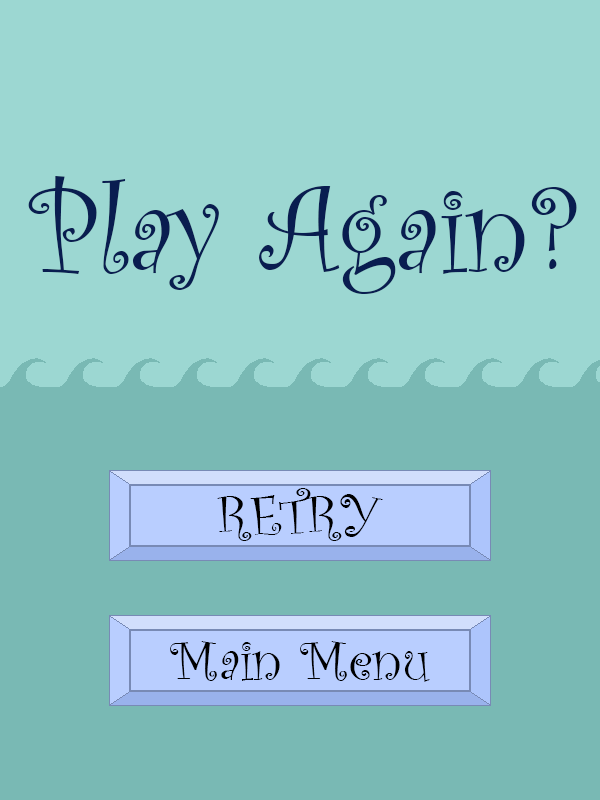
<style>
.page{position:relative;width:600px;height:800px;background:#9cd7d2}
.page>*{position:absolute;margin:0}
.t1{font:125px "CurlzMT";color:#091d50}
.t2{font:58.3px "CurlzMT";color:#000000}
</style>
<div class="page">
<p class="t1" style="left:28px;top:176px;width:549px;height:118px">Play Again?</p>
<p class="t2" style="left:217px;top:488px;width:166px;height:53px">RETRY</p>
<p class="t2" style="left:170px;top:641px;width:260px;height:41px">Main Menu</p>
</div>
